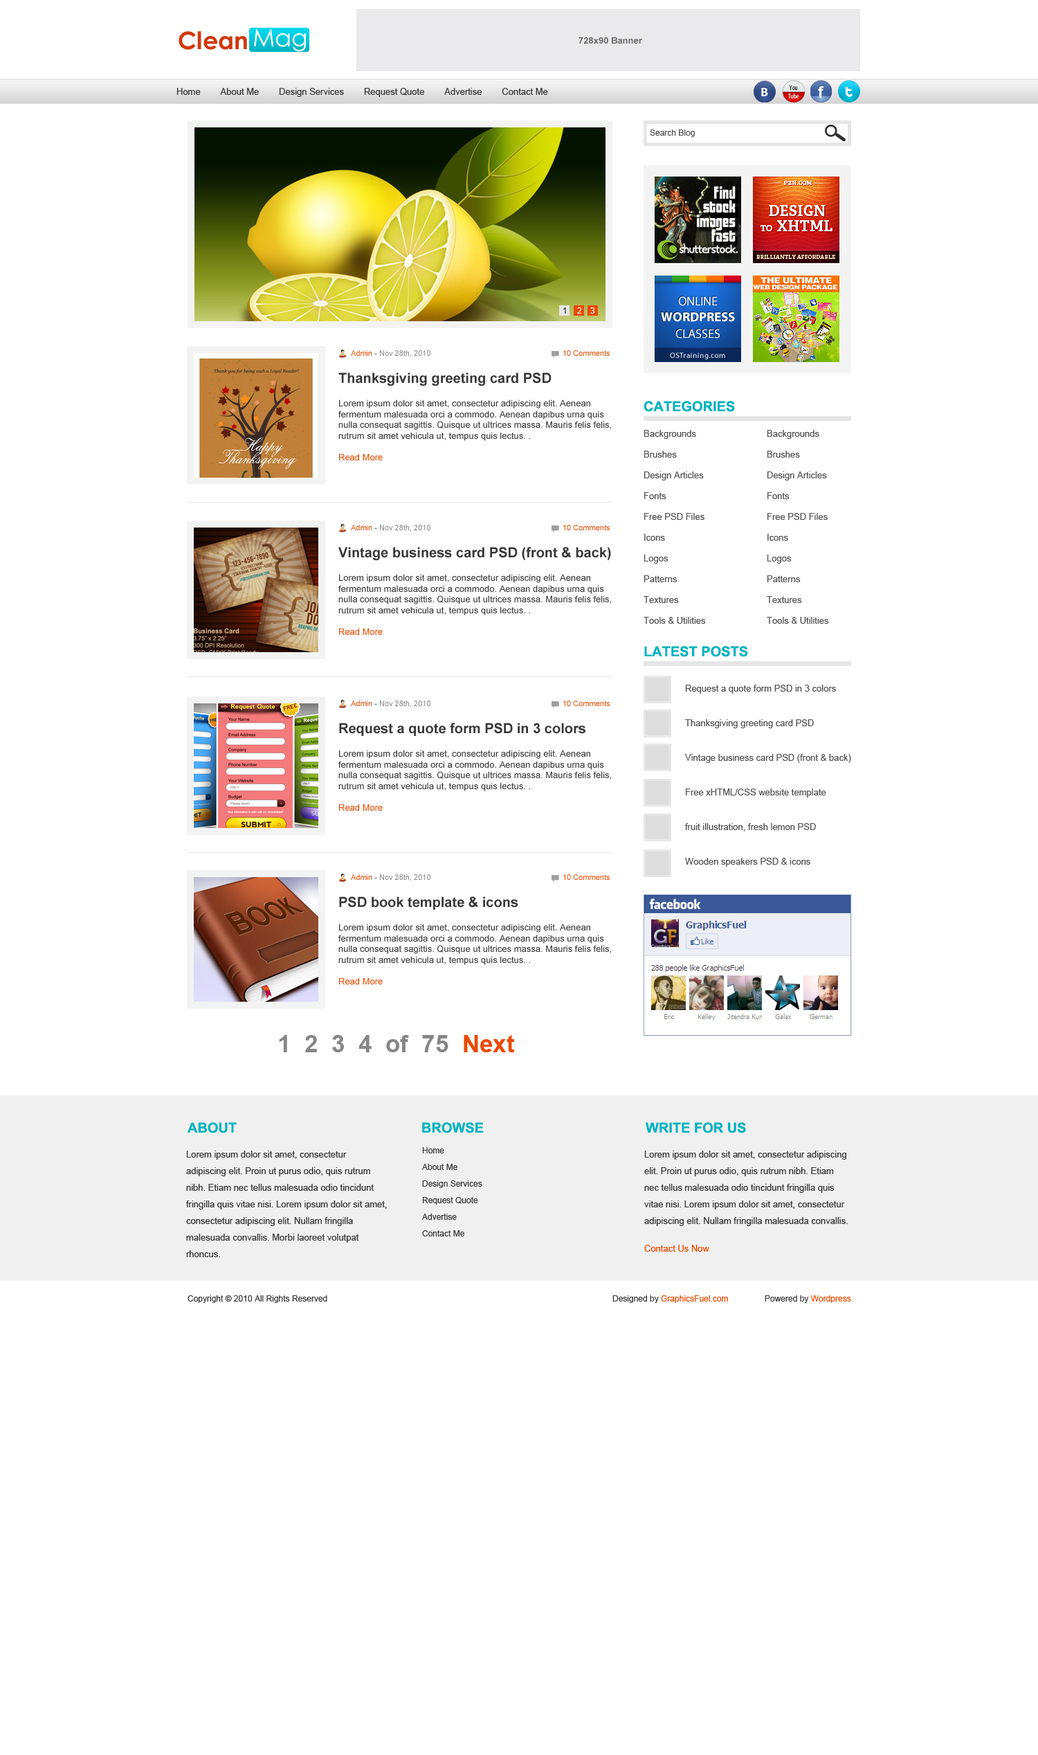
<style>
.page{position:relative;width:1038px;height:1755px;background:#ffffff}
.page>*{position:absolute;margin:0}
.t1{font:24.2px "CenturyGothic";color:#ffffff}
.t2{font:24.2px "CenturyGothic-Bold";color:#d0380c}
.t3{font:9px "ArialMT";color:#373737}
.t4{font:8.3px "ArialMT";color:#535353}
.t5{font:8.3px "ArialMT";color:#373737}
.t6{font:8.3px "ArialMT";color:#ffffff}
.t7{font:7.6px "ArialMT";color:#868686}
.t8{font:7.6px "ArialMT";color:#eb4900}
.t9{font:7.6px "ArialMT";color:#1450a3}
.t10{font:13.8px "Arial-BoldMT";color:#373737}
.t11{font:9px "ArialMT";color:#eb4900}
.t12{font:13.8px "Arial-BoldMT";color:#01b2bf;text-transform:uppercase}
.t13{font:9px/20.8px "ArialMT";color:#535353}
.t14{font:9px/17.3px "ArialMT";color:#535353}
.t15{font:24.2px "Arial-BoldMT";color:#868686}
.t16{font:24.2px "Arial-BoldMT";color:#eb4900}
.t17{font:9px/16.6px "ArialMT";color:#373737}
.t18{font:8.3px/16.6px "ArialMT";color:#373737}
.t19{font:8.3px "ArialMT";color:#eb4900}
</style>
<div class="page">
<p class="t1" style="left:254px;top:28px;width:52px;height:24px">Mag</p>
<p class="t2" style="left:179px;top:31px;width:68px;height:19px">Clean</p>
<p class="t3" style="left:177px;top:88px;width:371px;height:9px">Home        About Me        Design Services        Request Quote        Advertise        Contact Me</p>
<p class="t4" style="left:650px;top:129px;width:45px;height:8px">Search Blog</p>
<p class="t5" style="left:564px;top:307px;width:2px;height:7px">1</p>
<p class="t6" style="left:577px;top:307px;width:5px;height:7px">2</p>
<p class="t6" style="left:591px;top:307px;width:4px;height:7px">3</p>
<p class="t7" style="left:351px;top:350px;width:80px;height:7px"><span class="t8">Admin</span><span class="t9"> - </span>Nov 28th, 2010</p>
<p class="t8" style="left:564px;top:350px;width:46px;height:6px">10 Comments</p>
<p class="t3" style="left:339px;top:372px;width:272px;height:88px"><span class="t10">Thanksgiving greeting card PSD<br><br></span>Lorem ipsum dolor sit amet, consectetur adipiscing elit. Aenean fermentum malesuada orci a commodo. Aenean dapibus urna quis nulla consequat sagittis. Quisque ut ultrices massa. Mauris felis felis, rutrum sit amet vehicula ut, tempus quis lectus. . <br><br><span class="t11">Read More</span></p>
<p class="t12" style="left:644px;top:401px;width:91px;height:11px">categories</p>
<p class="t13" style="left:644px;top:430px;width:62px;height:194px">Backgrounds<br>Brushes<br>Design Articles<br>Fonts<br>Free PSD Files<br>Icons<br>Logos<br>Patterns<br>Textures<br>Tools &amp; Utilities</p>
<p class="t13" style="left:767px;top:430px;width:62px;height:194px">Backgrounds<br>Brushes<br>Design Articles<br>Fonts<br>Free PSD Files<br>Icons<br>Logos<br>Patterns<br>Textures<br>Tools &amp; Utilities</p>
<p class="t7" style="left:351px;top:525px;width:80px;height:7px"><span class="t8">Admin</span><span class="t9"> - </span>Nov 28th, 2010</p>
<p class="t8" style="left:564px;top:525px;width:46px;height:5px">10 Comments</p>
<p class="t3" style="left:339px;top:547px;width:272px;height:88px"><span class="t10">Vintage business card PSD (front &amp; back)<br><br></span>Lorem ipsum dolor sit amet, consectetur adipiscing elit. Aenean fermentum malesuada orci a commodo. Aenean dapibus urna quis nulla consequat sagittis. Quisque ut ultrices massa. Mauris felis felis, rutrum sit amet vehicula ut, tempus quis lectus. . <br><br><span class="t11">Read More</span></p>
<p class="t12" style="left:645px;top:646px;width:103px;height:11px">latest posts</p>
<p class="t14" style="left:685px;top:685px;width:167px;height:182px">Request a quote form PSD in 3 colors<br><br>Thanksgiving greeting card PSD<br><br>Vintage business card PSD (front &amp; back)<br><br>Free xHTML/CSS website template<br><br>fruit illustration, fresh lemon PSD<br><br>Wooden speakers PSD &amp; icons</p>
<p class="t7" style="left:351px;top:701px;width:80px;height:7px"><span class="t8">Admin</span><span class="t9"> - </span>Nov 28th, 2010</p>
<p class="t8" style="left:564px;top:701px;width:46px;height:5px">10 Comments</p>
<p class="t3" style="left:339px;top:723px;width:272px;height:88px"><span class="t10">Request a quote form PSD in 3 colors<br><br></span>Lorem ipsum dolor sit amet, consectetur adipiscing elit. Aenean fermentum malesuada orci a commodo. Aenean dapibus urna quis nulla consequat sagittis. Quisque ut ultrices massa. Mauris felis felis, rutrum sit amet vehicula ut, tempus quis lectus. . <br><br><span class="t11">Read More</span></p>
<p class="t7" style="left:351px;top:874px;width:80px;height:7px"><span class="t8">Admin</span><span class="t9"> - </span>Nov 28th, 2010</p>
<p class="t8" style="left:564px;top:874px;width:46px;height:6px">10 Comments</p>
<p class="t3" style="left:339px;top:897px;width:272px;height:87px"><span class="t10">PSD book template &amp; icons<br><br></span>Lorem ipsum dolor sit amet, consectetur adipiscing elit. Aenean fermentum malesuada orci a commodo. Aenean dapibus urna quis nulla consequat sagittis. Quisque ut ultrices massa. Mauris felis felis, rutrum sit amet vehicula ut, tempus quis lectus. . <br><br><span class="t11">Read More</span></p>
<p class="t15" style="left:279px;top:1035px;width:236px;height:17px">1  2  3  4  of  75  <span class="t16">Next</span></p>
<p class="t12" style="left:188px;top:1122px;width:49px;height:11px">about</p>
<p class="t12" style="left:422px;top:1122px;width:62px;height:11px">Browse</p>
<p class="t12" style="left:646px;top:1122px;width:100px;height:11px">write for us</p>
<p class="t17" style="left:186px;top:1151px;width:201px;height:106px">Lorem ipsum dolor sit amet, consectetur adipiscing elit. Proin ut purus odio, quis rutrum nibh. Etiam nec tellus malesuada odio tincidunt fringilla quis vitae nisi. Lorem ipsum dolor sit amet, consectetur adipiscing elit. Nullam fringilla malesuada convallis. Morbi laoreet volutpat rhoncus.</p>
<p class="t18" style="left:422px;top:1147px;width:61px;height:89px">Home<br>About Me<br>Design Services<br>Request Quote<br>Advertise<br>Contact Me</p>
<p class="t17" style="left:645px;top:1151px;width:203px;height:101px">Lorem ipsum dolor sit amet, consectetur adipiscing elit. Proin ut purus odio, quis rutrum nibh. Etiam nec tellus malesuada odio tincidunt fringilla quis vitae nisi. Lorem ipsum dolor sit amet, consectetur adipiscing elit. Nullam fringilla malesuada convallis. <br><br><span class="t11">Contact Us Now</span></p>
<p class="t5" style="left:188px;top:1295px;width:139px;height:8px">Copyright © 2010 All Rights Reserved</p>
<p class="t19" style="left:613px;top:1295px;width:115px;height:8px"><span class="t5">Designed by</span> GraphicsFuel.com</p>
<p class="t5" style="left:765px;top:1295px;width:87px;height:8px">Powered by<span class="t19"> Wordpress</span></p>
</div>
